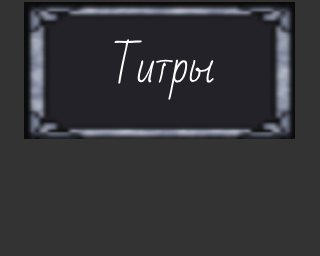
<style>
.page{position:relative;width:320px;height:256px;background:#333333}
.page>*{position:absolute;margin:0}
.t1{font:43px "BadScript-Regular";color:#ffffff}
</style>
<div class="page">
<p class="t1" style="left:114px;top:39px;width:100px;height:61px">Титры</p>
</div>
